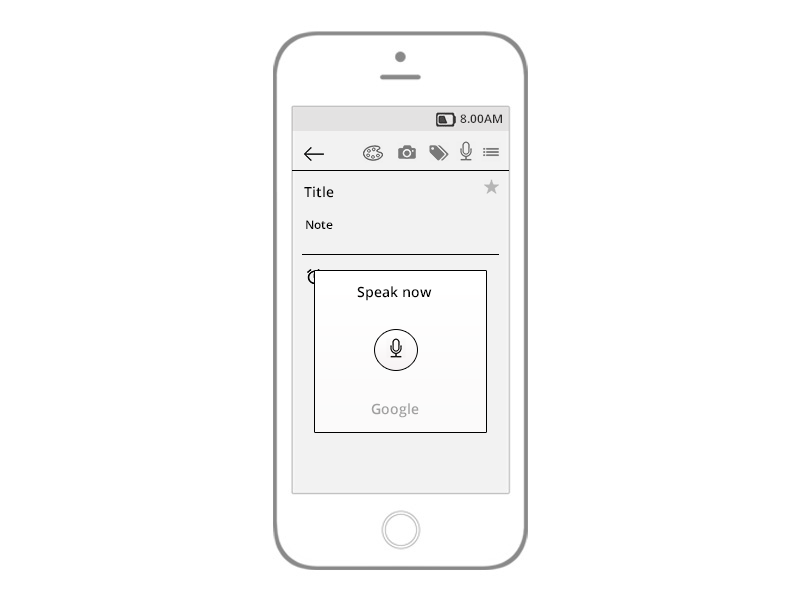
<style>
.page{position:relative;width:800px;height:600px;background:#ffffff}
.page>*{position:absolute;margin:0}
.t1{font:12px "OpenSans-Semibold";color:#2e2d2d}
.t2{font:14px "OpenSans-Semibold";color:#000000}
.t3{font:12px "OpenSans-Semibold";color:#000000}
.t4{font:14px "OpenSans-Semibold";color:#a09f9f}
</style>
<div class="page">
<p class="t1" style="left:460px;top:114px;width:42px;height:9px">8.00AM</p>
<p class="t2" style="left:304px;top:186px;width:30px;height:12px">Title</p>
<p class="t3" style="left:306px;top:220px;width:27px;height:9px">Note</p>
<p class="t2" style="left:357px;top:286px;width:75px;height:15px">Speak now</p>
<p class="t4" style="left:371px;top:403px;width:48px;height:15px">Google</p>
</div>
